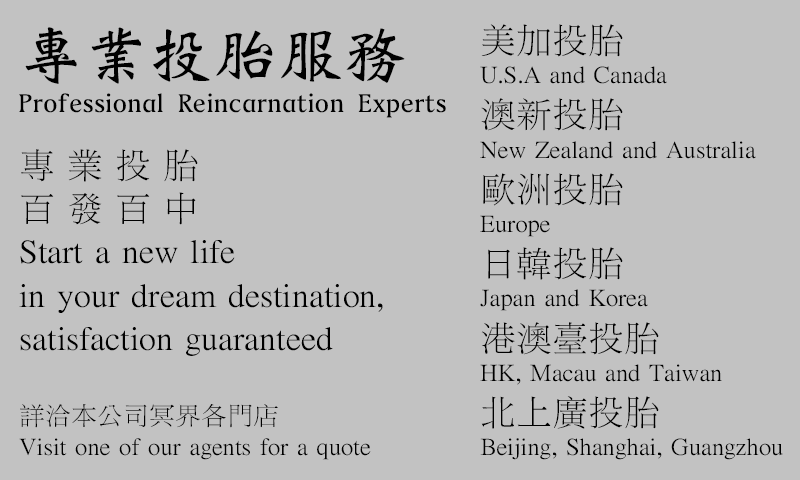
<style>
.page{position:relative;width:800px;height:480px;background:#c2c2c2}
.page>*{position:absolute;margin:0}
.t1{font:27px "Weibei-TC-Bold";color:#000000}
.t2{font:65px "Weibei-TC-Bold";color:#000000}
.t3{font:26px "LiSungLight";color:#000000}
.t4{font:36px "LiSungLight";color:#000000}
</style>
<div class="page">
<p class="t1" style="left:19px;top:27px;width:427px;height:91px"><span class="t2">專業投胎服務<br></span>Professional Reincarnation Experts</p>
<p class="t3" style="left:480px;top:24px;width:303px;height:436px"><span class="t4">美加投胎<br></span>U.S.A and Canada<br><span class="t4">澳新投胎<br></span>New Zealand and Australia<br><span class="t4">歐洲投胎<br></span>Europe<br><span class="t4">日韓投胎</span><br>Japan and Korea<br><span class="t4">港澳臺投胎<br></span>HK, Macau and Taiwan<br><span class="t4">北上廣投胎<br></span>Beijing, Shanghai, Guangzhou</p>
<p class="t4" style="left:19px;top:149px;width:364px;height:311px">專 業 投 胎<br>百 發 百 中<br>Start a new life<br>in your dream destination, <br>satisfaction guaranteed<br><br><span class="t3">詳洽本公司冥界各門店<br>Visit one of our agents for a quote</span></p>
</div>
